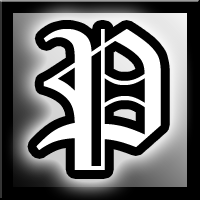
<style>
.page{position:relative;width:200px;height:200px;background:#000000}
.page>*{position:absolute;margin:0}
.t1{font:164px "OldEnglishTextMT";color:#ffffff}
</style>
<div class="page">
<p class="t1" style="left:36px;top:29px;width:125px;height:141px">P</p>
</div>
